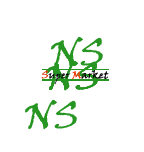
<style>
.page{position:relative;width:144px;height:152px;background:#ffffff}
.page>*{position:absolute;margin:0}
.t1{font:36.6px "VinerHandITC";color:#279521}
.t2{font:10.2px "VinerHandITC";color:#050505}
.t3{font:10.2px "VinerHandITC";color:#e1380d}
.t4{font:10.2px "VinerHandITC";color:#070707}
.t5{font:10.2px "VinerHandITC";color:#f13e11}
</style>
<div class="page">
<p class="t1" style="left:51px;top:37px;width:52px;height:30px">NS</p>
<p class="t2" style="left:41px;top:70px;width:68px;height:15px"><span class="t3">S</span><span class="t4">uper </span><span class="t5">M</span>arket</p>
</div>
